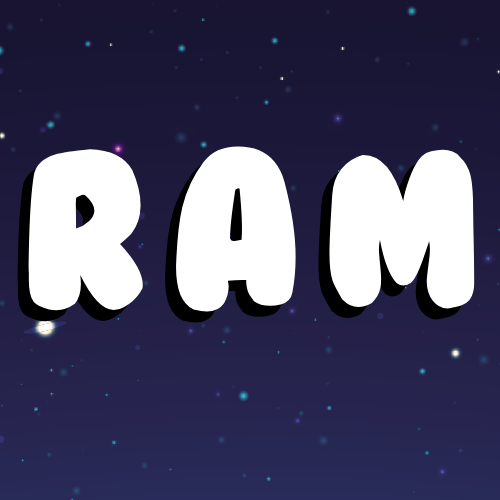
<style>
.page{position:relative;width:500px;height:500px}
.page>*{position:absolute;margin:0}
.t1{font:205px "BubbleGum";color:#ffffff}
</style>
<div class="page">
<p class="t1" style="left:28px;top:146px;width:447px;height:166px">R A M</p>
</div>
